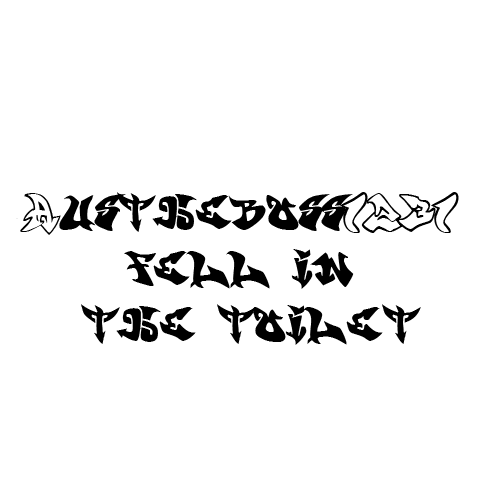
<style>
.page{position:relative;width:500px;height:500px;background:#ffffff}
.page>*{position:absolute;margin:0}
.t1{font:46.9px "Graffonti.atomicbomb";letter-spacing:-0.02em;color:#000000}
</style>
<div class="page">
<p class="t1" style="left:16px;top:192px;width:443px;height:153px;text-align:center">Austheboss1231 <br>fell in <br>the toilet</p>
</div>
